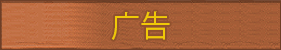
<style>
.page{position:relative;width:281px;height:50px}
.page>*{position:absolute;margin:0}
.t1{font:30px "KozGoPr6N-Regular";color:#f0c907}
</style>
<div class="page">
<p class="t1" style="left:111px;top:11px;width:59px;height:29px">广告</p>
</div>
